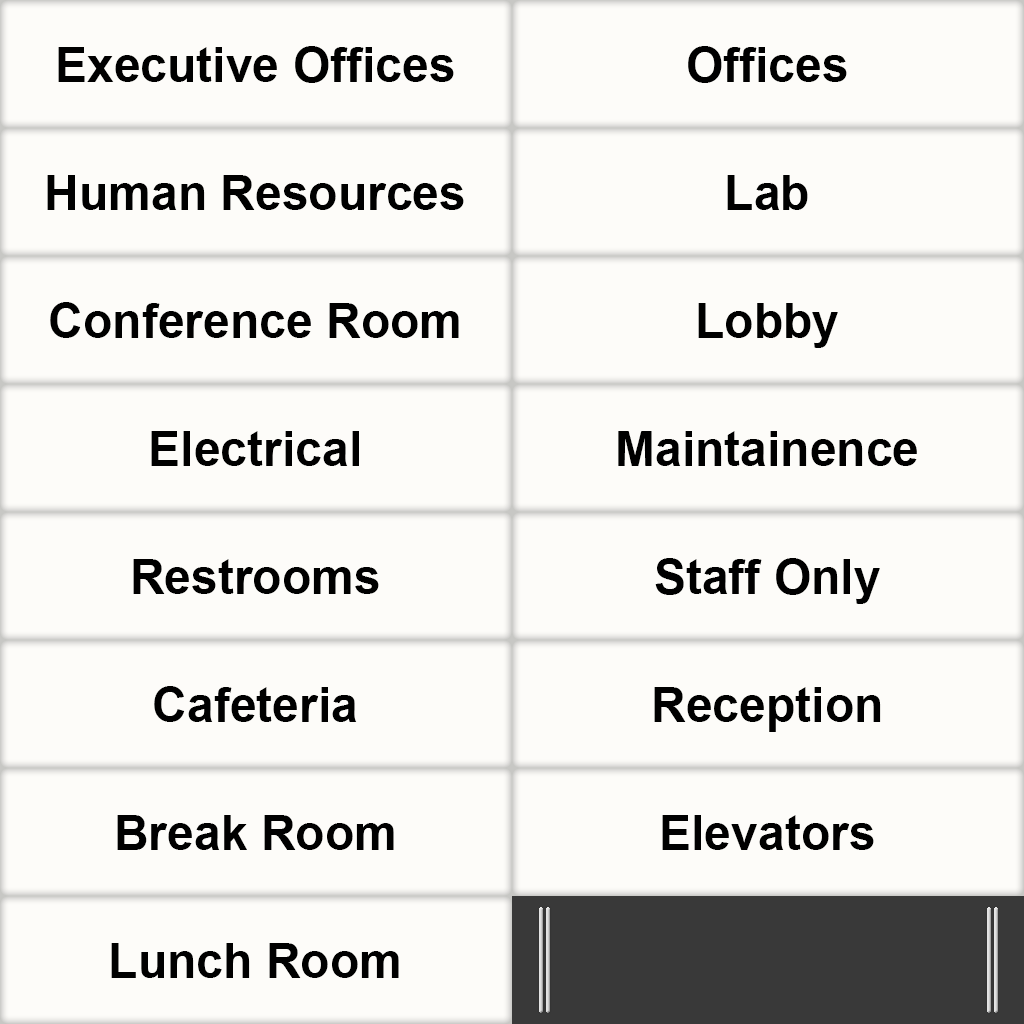
<style>
.page{position:relative;width:1024px;height:1024px;background:#fdfcf9}
.page>*{position:absolute;margin:0}
.t1{font:48px "Arial-BoldMT";color:#000000}
</style>
<div class="page">
<p class="t1" style="left:58px;top:46px;width:396px;height:37px">Executive Offices</p>
<p class="t1" style="left:688px;top:46px;width:159px;height:37px">Offices</p>
<p class="t1" style="left:47px;top:175px;width:417px;height:35px">Human Resources</p>
<p class="t1" style="left:727px;top:175px;width:81px;height:35px">Lab</p>
<p class="t1" style="left:50px;top:302px;width:409px;height:36px">Conference Room</p>
<p class="t1" style="left:698px;top:303px;width:140px;height:45px">Lobby</p>
<p class="t1" style="left:151px;top:431px;width:208px;height:35px">Electrical</p>
<p class="t1" style="left:618px;top:431px;width:299px;height:35px">Maintainence</p>
<p class="t1" style="left:655px;top:558px;width:225px;height:46px">Staff Only</p>
<p class="t1" style="left:133px;top:559px;width:246px;height:35px">Restrooms</p>
<p class="t1" style="left:154px;top:686px;width:203px;height:36px">Cafeteria</p>
<p class="t1" style="left:654px;top:687px;width:227px;height:45px">Reception</p>
<p class="t1" style="left:117px;top:815px;width:277px;height:35px">Break Room</p>
<p class="t1" style="left:662px;top:815px;width:212px;height:35px">Elevators</p>
<p class="t1" style="left:111px;top:943px;width:288px;height:35px">Lunch Room</p>
</div>
